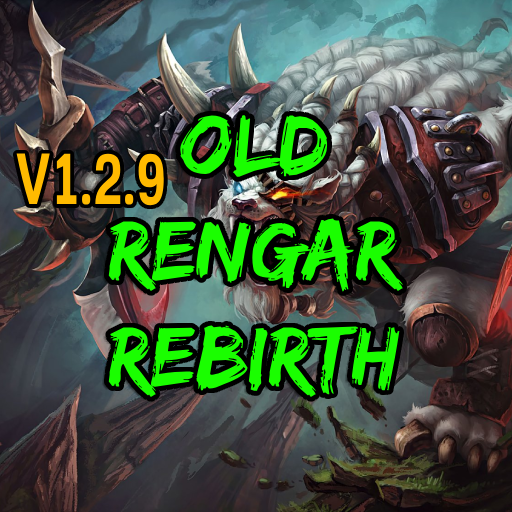
<style>
.page{position:relative;width:512px;height:512px}
.page>*{position:absolute;margin:0}
.t1{font:88px "Edo";color:#1afe00}
.t2{font:70.5px "FamiliarPro-Bold";color:#ffba00;scale:0.73 1}
</style>
<div class="page">
<p class="t1" style="left:108px;top:115px;width:295px;height:282px;text-align:center">OLD<br>RENGAR<br>REBIRTH</p>
<p class="t2" style="left:16px;top:153px;width:148px;height:53px">V1.2.9</p>
</div>
